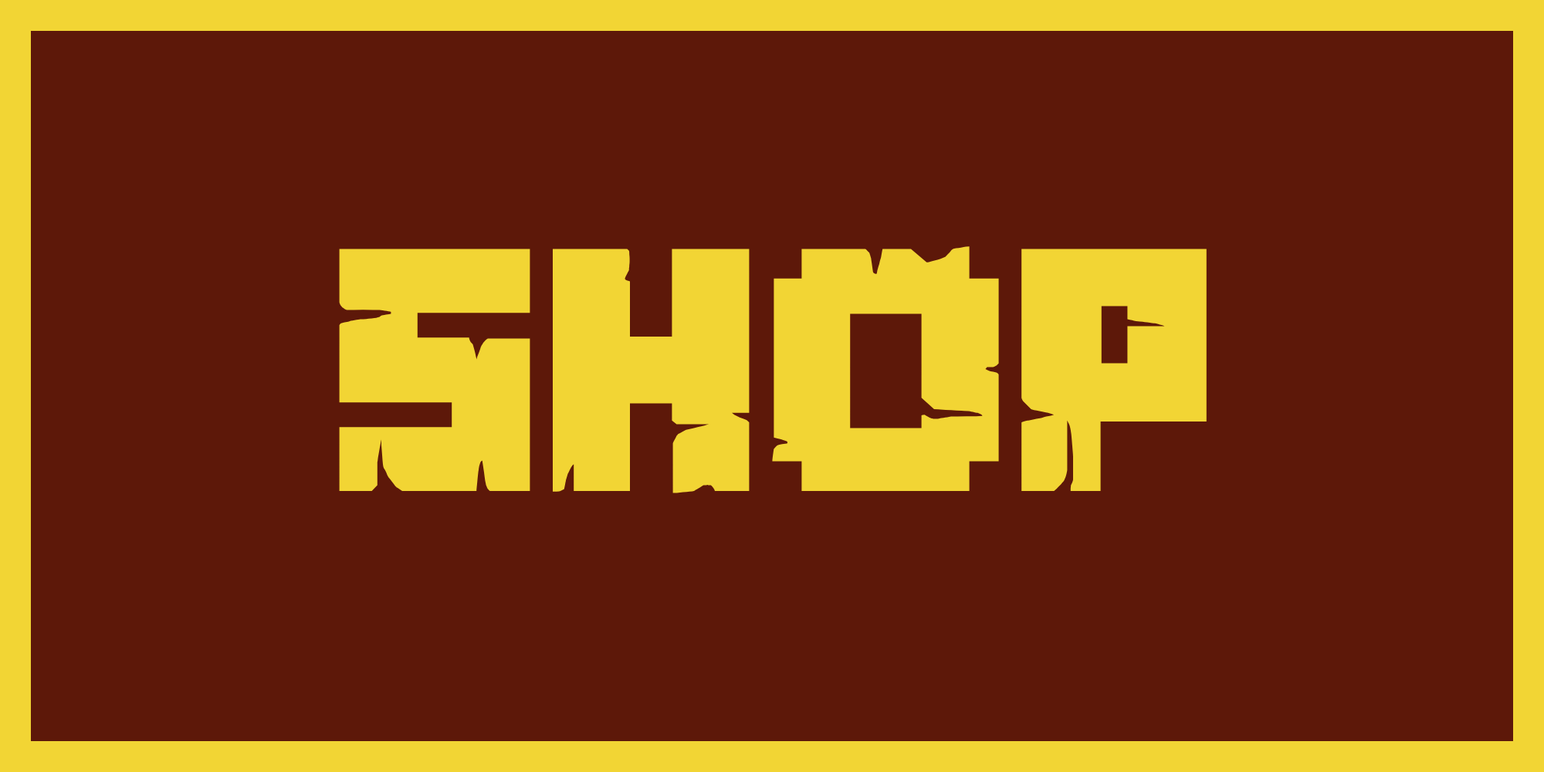
<style>
.page{position:relative;width:1544px;height:772px;background:#5d1809}
.page>*{position:absolute;margin:0}
.t1{font:308.9px "MinecrafterAlt";color:#f2d534}
</style>
<div class="page">
<p class="t1" style="left:339px;top:246px;width:868px;height:247px">SHOP</p>
</div>
